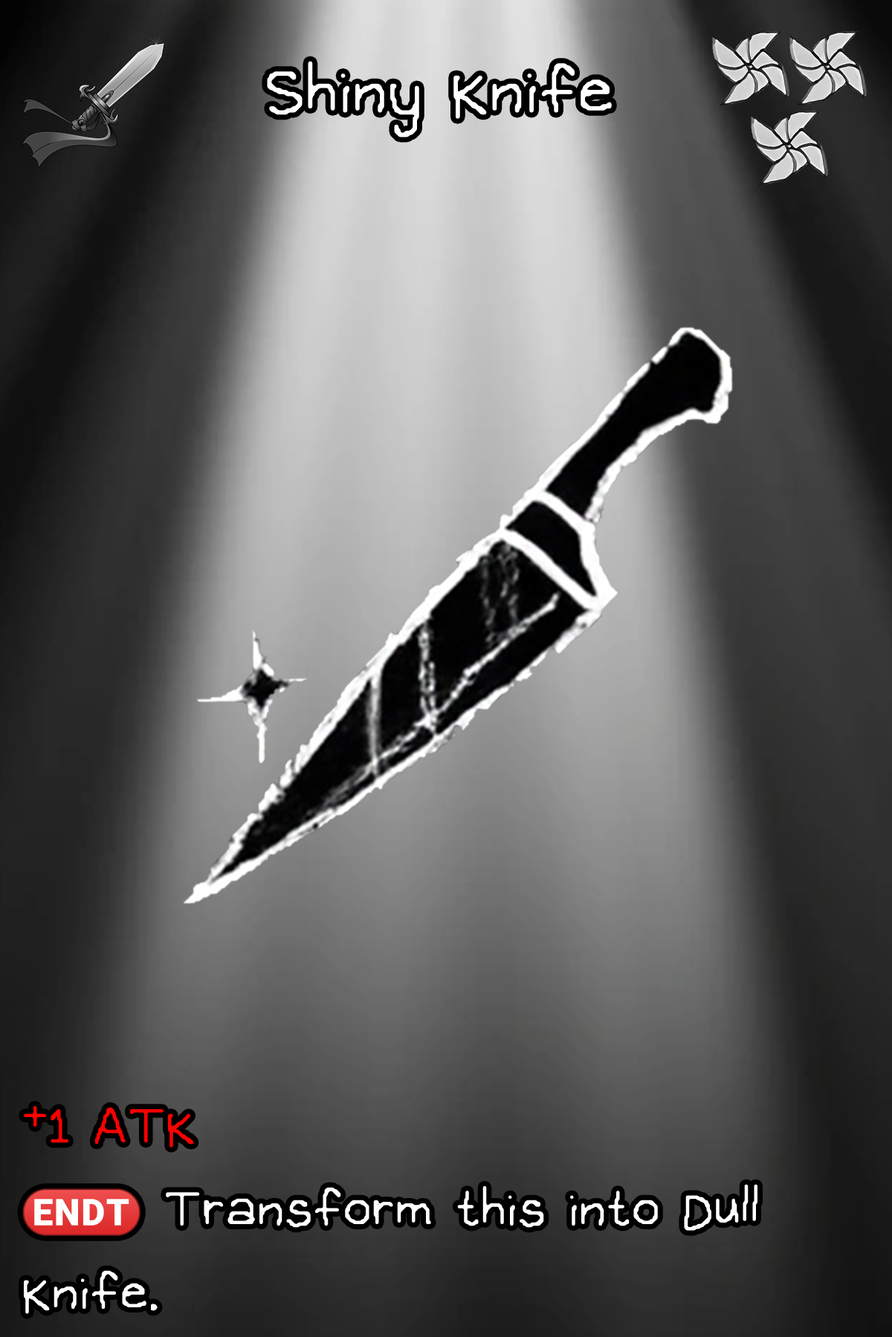
<style>
.page{position:relative;width:892px;height:1337px}
.page>*{position:absolute;margin:0}
.t1{font:170.9px "OMORI_GAME2";color:#ffffff}
.t2{font:132.3px/83.2px "OMORI_GAME";color:#ffffff}
.t3{font:132.3px/83.2px "OMORI_GAME";color:#ff0000}
.t4{font:82.7px/83.2px "stoogedings-Regular";color:#ffffff}
</style>
<div class="page">
<p class="t1" style="left:267px;top:61px;width:344px;height:76px">Shiny Knife</p>
<p class="t2" style="left:22px;top:1106px;width:735px;height:208px"><span class="t3">+1 ATK<br></span><span class="t4">(ENDT)</span> Transform this into Dull Knife.</p>
</div>
